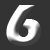
<style>
.page{position:relative;width:50px;height:50px;background:#333333}
.page>*{position:absolute;margin:0}
.t1{font:60px "ErasITC-Bold"}
</style>
<div class="page">
<p class="t1" style="left:6px;top:5px;width:35px;height:41px">6</p>
</div>
